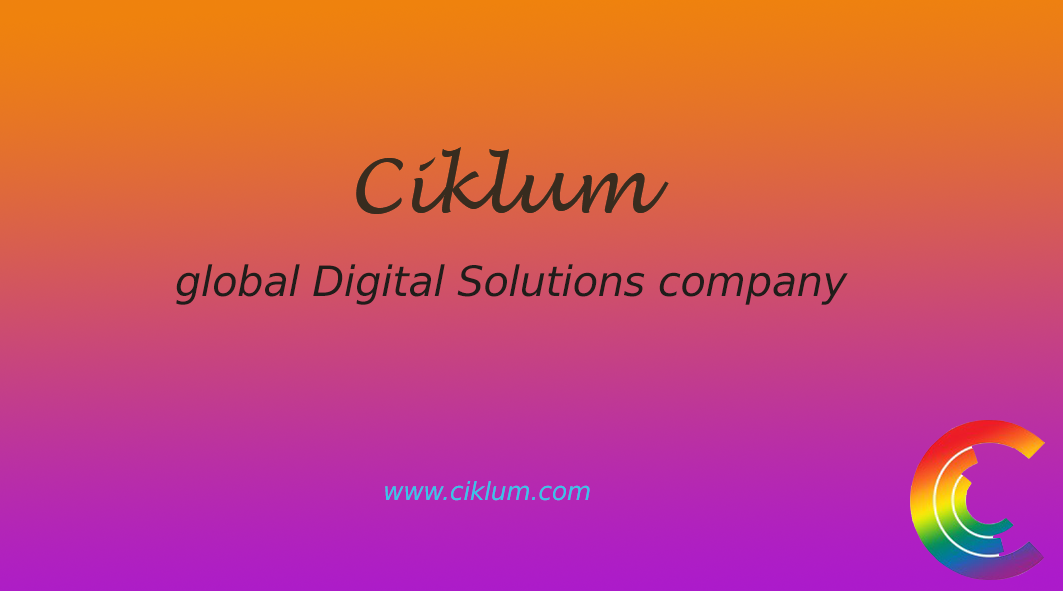
<style>
.page{position:relative;width:1063px;height:591px}
.page>*{position:absolute;margin:0}
.t1{font:75px "LucidaHandwriting-Italic";letter-spacing:-0.01em;color:#382c1f}
.t2{font:41.7px "DejaVuSans-Oblique";letter-spacing:-0.01em;color:#1f1d1a}
.t3{font:25px "DejaVuSans-Oblique";letter-spacing:-0.01em;color:#36c6ea}
</style>
<div class="page">
<p class="t1" style="left:356px;top:147px;width:313px;height:67px">Ciklum</p>
<p class="t2" style="left:176px;top:264px;width:672px;height:41px">global Digital Solutions company</p>
<p class="t3" style="left:385px;top:481px;width:205px;height:20px">www.ciklum.com</p>
</div>
